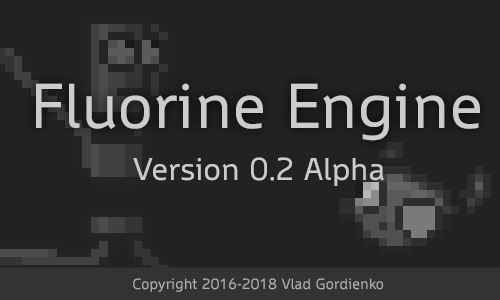
<style>
.page{position:relative;width:500px;height:300px;background:#222222}
.page>*{position:absolute;margin:0}
.t1{font:60px "WascoSans";color:#cccccc}
.t2{font:30px "WascoSans";color:#cccccc}
.t3{font:14px "WascoSans";color:#afafaf}
</style>
<div class="page">
<p class="t1" style="left:36px;top:83px;width:444px;height:58px">Fluorine Engine</p>
<p class="t2" style="left:133px;top:157px;width:251px;height:29px">Version 0.2 Alpha</p>
<p class="t3" style="left:133px;top:278px;width:250px;height:14px">Copyright 2016-2018 Vlad Gordienko</p>
</div>
